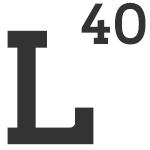
<style>
.page{position:relative;width:150px;height:150px;background:#ffffff}
.page>*{position:absolute;margin:0}
.t1{font:54.4px "TwentytwelveSlab-Bold";color:#333333}
.t2{font:153.1px "TwentytwelveSlab-Bold";color:#333333}
</style>
<div class="page">
<p class="t1" style="left:81px;top:2px;width:65px;height:43px">40</p>
<p class="t2" style="left:7px;top:30px;width:87px;height:115px">L</p>
</div>
